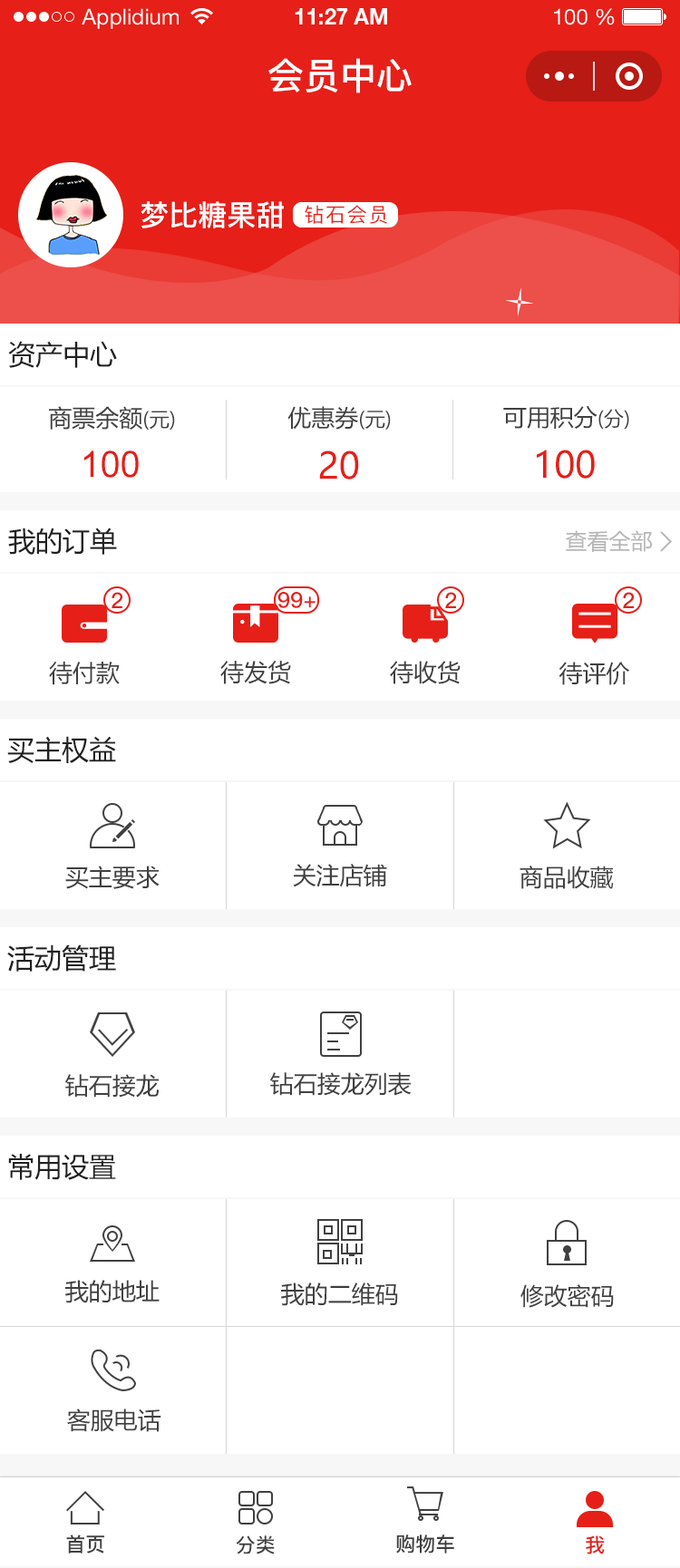
<style>
.page{position:relative;width:680px;height:1568px;background:#ffffff}
.page>*{position:absolute;margin:0}
.t1{font:21.8px "HelveticaNeueLTStd-Roman";color:#ffffff}
.t2{font:21.8px "HelveticaNeueLTStd-Bd";color:#ffffff}
.t3{font:36.3px "PingFang-SC-Bold";color:#ffffff;text-transform:uppercase}
.t4{font:29px "PingFang-SC-Bold";color:#ffffff;text-transform:uppercase}
.t5{font:19.9px "PingFang-SC-Medium";letter-spacing:0.08em;color:#e61f18}
.t6{font:27.2px "MicrosoftYaHei";color:#202020;text-transform:uppercase}
.t7{font:23.6px "MicrosoftYaHei";color:#404040;text-transform:uppercase}
.t8{font:19.9px "MicrosoftYaHei";color:#404040;text-transform:uppercase}
.t9{font:36.3px "MicrosoftYaHei";color:#e61f18;text-transform:uppercase}
.t10{font:36.3px "ArialMT";color:#e61f18;text-transform:uppercase}
.t11{font:21.8px "MicrosoftYaHei";color:#b6b6b6;text-transform:uppercase}
.t12{font:21.8px "PingFang-SC-Bold";color:#e61f18;text-transform:uppercase}
.t13{font:19.9px "PingFang-SC-Bold";color:#404040;text-transform:uppercase}
.t14{font:19.9px "PingFang-SC-Bold";color:#e61f18;text-transform:uppercase}
</style>
<div class="page">
<p class="t1" style="left:82px;top:8px;width:97px;height:21px">Applidium</p>
<p class="t2" style="left:295px;top:8px;width:92px;height:16px">11:27 AM</p>
<p class="t1" style="left:554px;top:8px;width:61px;height:17px">100 %</p>
<p class="t3" style="left:268px;top:58px;width:143px;height:35px">会员中心</p>
<p class="t4" style="left:140px;top:201px;width:144px;height:27px">梦比糖果甜</p>
<p class="t5" style="left:305px;top:205px;width:82px;height:19px">钻石会员</p>
<p class="t6" style="left:8px;top:341px;width:109px;height:27px">资产中心</p>
<p class="t7" style="left:49px;top:406px;width:126px;height:24px">商票余额<span class="t8">(元)</span></p>
<p class="t7" style="left:287px;top:406px;width:104px;height:24px">优惠券<span class="t8">(元)</span></p>
<p class="t7" style="left:503px;top:405px;width:126px;height:25px">可用积分<span class="t8">(分)</span></p>
<p class="t9" style="left:537px;top:450px;width:58px;height:29px">100</p>
<p class="t10" style="left:83px;top:450px;width:56px;height:28px">100</p>
<p class="t9" style="left:319px;top:450px;width:40px;height:29px">20</p>
<p class="t6" style="left:8px;top:528px;width:109px;height:27px">我的订单</p>
<p class="t11" style="left:566px;top:530px;width:86px;height:22px">查看全部</p>
<p class="t12" style="left:111px;top:592px;width:11px;height:16px">2</p>
<p class="t12" style="left:277px;top:592px;width:38px;height:16px">99+</p>
<p class="t12" style="left:445px;top:592px;width:11px;height:16px">2</p>
<p class="t12" style="left:623px;top:592px;width:11px;height:16px">2</p>
<p class="t7" style="left:49px;top:661px;width:71px;height:24px">待付款</p>
<p class="t7" style="left:220px;top:660px;width:71px;height:24px">待发货</p>
<p class="t7" style="left:390px;top:661px;width:70px;height:23px">待收货</p>
<p class="t7" style="left:558px;top:662px;width:71px;height:23px">待评价</p>
<p class="t6" style="left:7px;top:736px;width:109px;height:27px">买主权益</p>
<p class="t7" style="left:65px;top:866px;width:95px;height:23px">买主要求</p>
<p class="t7" style="left:293px;top:864px;width:94px;height:23px">关注店铺</p>
<p class="t7" style="left:519px;top:866px;width:95px;height:23px">商品收藏</p>
<p class="t6" style="left:7px;top:944px;width:109px;height:28px">活动管理</p>
<p class="t7" style="left:270px;top:1072px;width:141px;height:24px">钻石接龙列表</p>
<p class="t7" style="left:65px;top:1074px;width:95px;height:24px">钻石接龙</p>
<p class="t6" style="left:8px;top:1154px;width:108px;height:26px">常用设置</p>
<p class="t7" style="left:65px;top:1280px;width:95px;height:23px">我的地址</p>
<p class="t7" style="left:281px;top:1282px;width:117px;height:24px">我的二维码</p>
<p class="t7" style="left:520px;top:1284px;width:94px;height:24px">修改密码</p>
<p class="t7" style="left:67px;top:1408px;width:94px;height:24px">客服电话</p>
<p class="t13" style="left:66px;top:1534px;width:38px;height:19px">首页</p>
<p class="t13" style="left:236px;top:1535px;width:39px;height:19px">分类</p>
<p class="t13" style="left:396px;top:1534px;width:58px;height:19px">购物车</p>
<p class="t14" style="left:586px;top:1535px;width:19px;height:19px">我</p>
</div>
